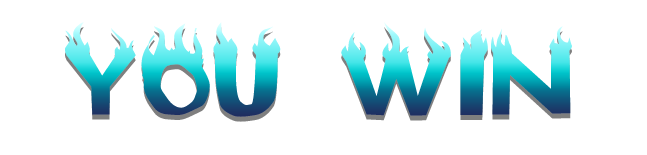
<style>
.page{position:relative;width:647px;height:155px;background:#ffffff}
.page>*{position:absolute;margin:0}
.t1{font:116.3px "Flame"}
</style>
<div class="page">
<p class="t1" style="left:65px;top:22px;width:507px;height:95px">YOU WIN</p>
</div>
